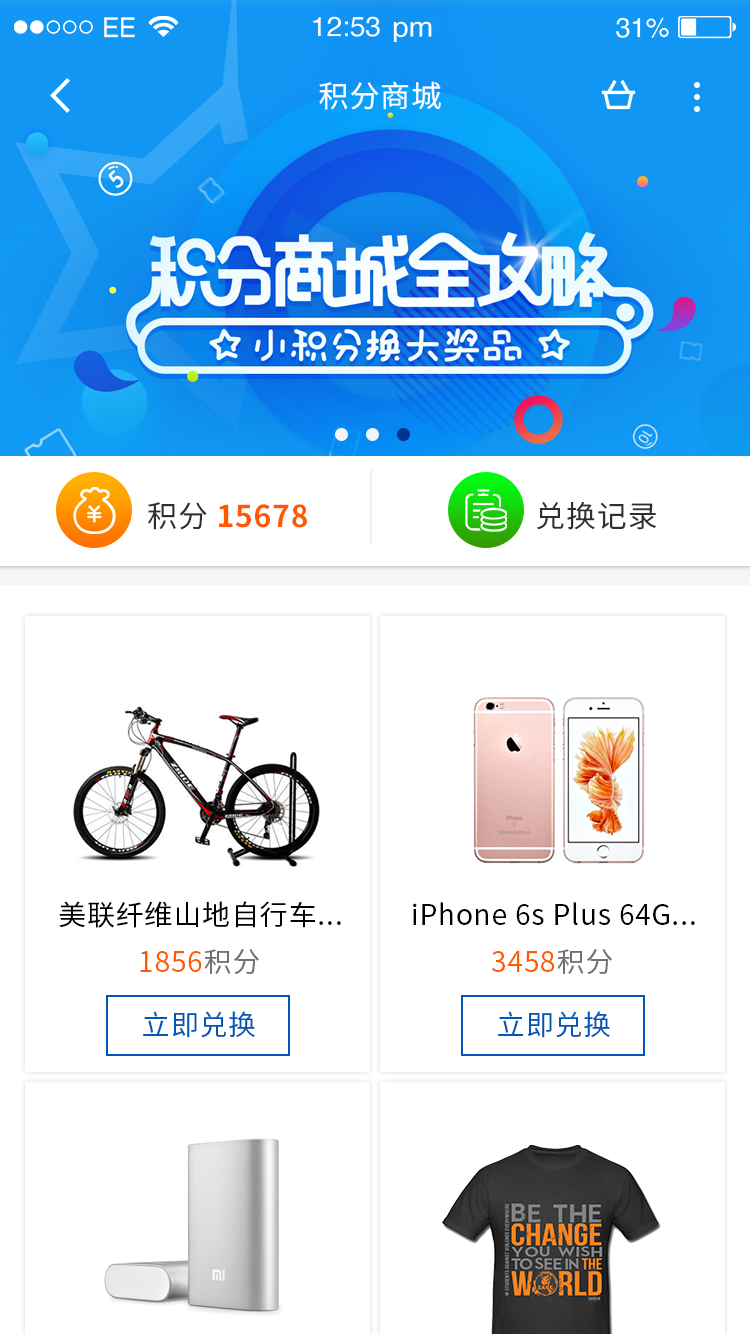
<style>
.page{position:relative;width:750px;height:1334px;background:#ffffff}
.page>*{position:absolute;margin:0}
.t1{font:30px "SourceHanSansCN-Regular";letter-spacing:0.03em;color:#ffffff;text-transform:uppercase}
.t2{font:30px "SourceHanSansCN-Bold";letter-spacing:0.03em;color:#ff5a00;text-transform:uppercase}
.t3{font:30px "SourceHanSansCN-Regular";letter-spacing:0.03em;color:#2f2f2f;text-transform:uppercase}
.t4{font:28px "SourceHanSansCN-Regular";letter-spacing:0.03em;color:#000000}
.t5{font:28px "SourceHanSansCN-Regular";letter-spacing:0.03em;color:#ff5a00}
.t6{font:28px "SourceHanSansCN-Regular";letter-spacing:0.03em;color:#727171}
.t7{font:28px "SourceHanSansCN-Regular";letter-spacing:0.03em;color:#0058b6}
</style>
<div class="page">
<p class="t1" style="left:319px;top:81px;width:122px;height:29px">积分商城</p>
<p class="t2" style="left:148px;top:502px;width:159px;height:28px"><span class="t3">积分 </span>15678</p>
<p class="t3" style="left:537px;top:501px;width:120px;height:29px">兑换记录</p>
<p class="t4" style="left:59px;top:901px;width:282px;height:27px">美联纤维山地自行车...</p>
<p class="t4" style="left:413px;top:902px;width:282px;height:23px">iPhone 6s Plus 64G...</p>
<p class="t5" style="left:140px;top:949px;width:120px;height:26px">1856<span class="t6">积分</span></p>
<p class="t5" style="left:491px;top:949px;width:122px;height:26px">3458<span class="t6">积分</span></p>
<p class="t7" style="left:143px;top:1011px;width:112px;height:27px">立即兑换</p>
<p class="t7" style="left:498px;top:1011px;width:112px;height:27px">立即兑换</p>
</div>
